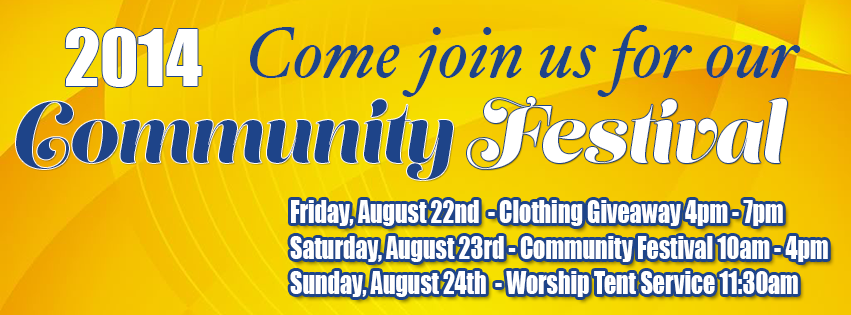
<style>
.page{position:relative;width:851px;height:315px}
.page>*{position:absolute;margin:0}
.t1{font:72px "Impact";color:#ffffff}
.t2{font:72px "HoeflerText-Italic";color:#1e4489}
.t3{font:80px "LustScript";color:#1e4489}
.t4{font:80px "LustScript";color:#ffffff}
.t5{font:29.3px "Impact";color:#ffffff;scale:0.82 1}
</style>
<div class="page">
<p class="t1" style="left:65px;top:28px;width:137px;height:59px">2014</p>
<p class="t2" style="left:250px;top:25px;width:551px;height:72px">Come join us for our</p>
<p class="t3" style="left:16px;top:99px;width:437px;height:81px">Community</p>
<p class="t4" style="left:467px;top:97px;width:320px;height:72px">Festival</p>
<p class="t5" style="left:290px;top:200px;width:538px;height:97px">Friday, August 22nd  - Clothing Giveaway 4pm - 7pm<br>Saturday, August 23rd - Community Festival 10am - 4pm<br>Sunday, August 24th  - Worship Tent Service 11:30am</p>
</div>
